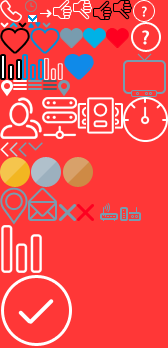
<style>
.page{position:relative;width:168px;height:348px;background:#ff3737}
.page>*{position:absolute;margin:0}
.t1{font:20px "MyriadPro-Semibold";color:#ffffff}
</style>
<div class="page">
<p class="t1" style="left:142px;top:30px;width:7px;height:15px">?</p>
</div>
